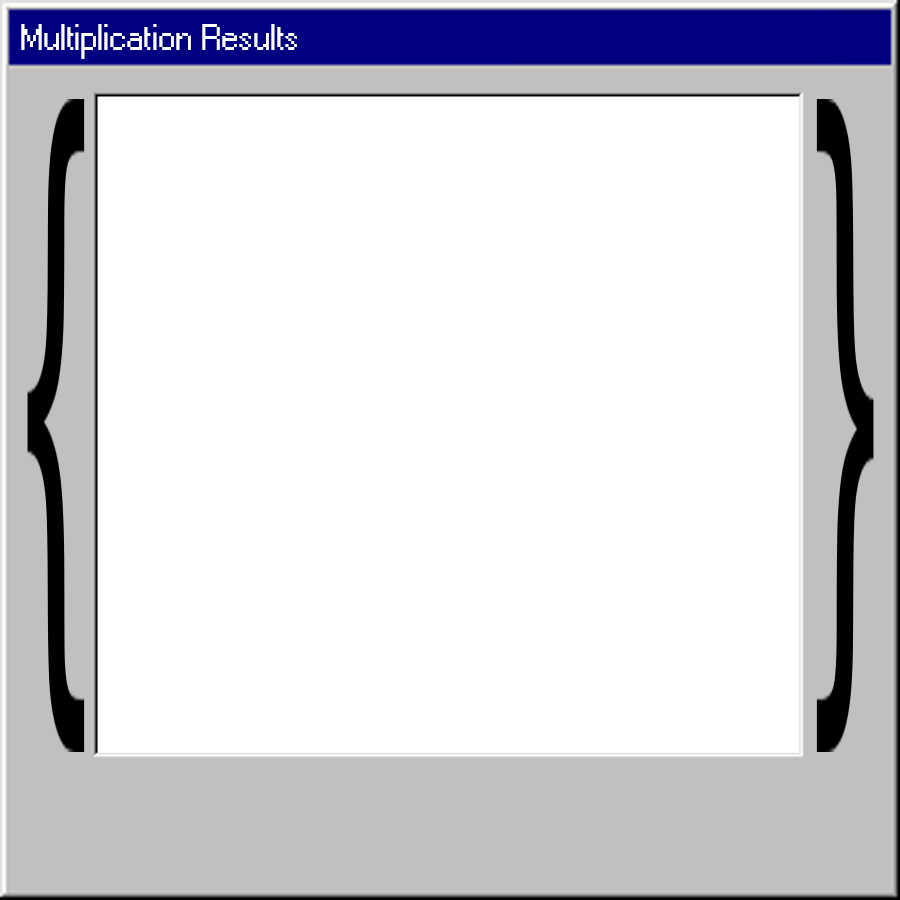
<style>
.page{position:relative;width:900px;height:900px;background:#ffffff}
.page>*{position:absolute;margin:0}
.t1{font:36px "Windows";color:#ffffff}
</style>
<div class="page">
<p class="t1" style="left:21px;top:24px;width:276px;height:35px">Multiplication Results</p>
</div>
